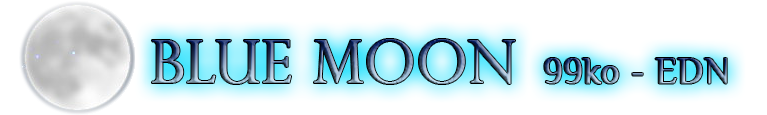
<style>
.page{position:relative;width:767px;height:115px;background:#ffffff}
.page>*{position:absolute;margin:0}
.t1{font:58px "PerpetuaTitlingMT-Light";font-weight:bold}
.t2{font:36px "Philosopher";font-weight:bold}
</style>
<div class="page">
<p class="t1" style="left:152px;top:39px;width:363px;height:45px">Blue Moon</p>
<p class="t2" style="left:544px;top:58px;width:183px;height:26px">99ko - EDN</p>
</div>
